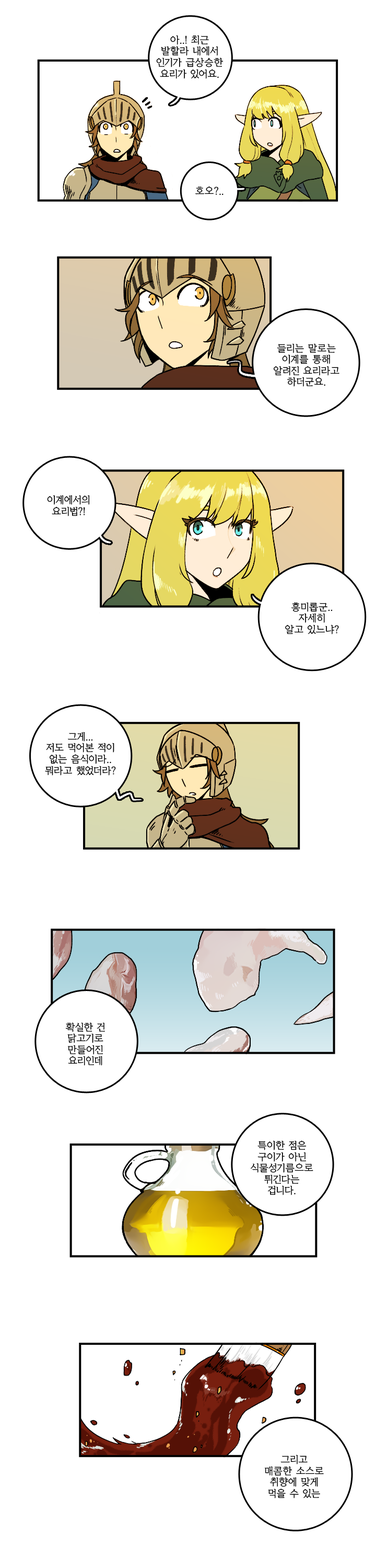
<style>
.page{position:relative;width:376px;height:1568px;background:#ffffff}
.page>*{position:absolute;margin:0}
.t1{font:9.4px "KoreanYMJ-B";color:#000000}
</style>
<div class="page">
<p class="t1" style="left:156px;top:35px;width:67px;height:44px;text-align:center">아..! 최근<br>발할라 내에서<br>인기가 급상승한<br>요리가 있어요.</p>
<p class="t1" style="left:195px;top:186px;width:29px;height:9px">호오?..</p>
<p class="t1" style="left:274px;top:343px;width:66px;height:44px;text-align:center">들리는 말로는<br>이계를 통해<br>알려진 요리라고<br>하더군요.</p>
<p class="t1" style="left:47px;top:495px;width:43px;height:21px;text-align:center">이계에서의<br>요리법?!</p>
<p class="t1" style="left:285px;top:602px;width:54px;height:33px;text-align:center">흥미롭군..<br>자세히<br>알고 있느냐?</p>
<p class="t1" style="left:45px;top:732px;width:71px;height:44px;text-align:center">그게...<br>저도 먹어본 적이<br>없는 음식이라..<br>뭐라고 했었더라?</p>
<p class="t1" style="left:65px;top:1022px;width:40px;height:44px;text-align:center">확실한 건<br>닭고기로<br>만들어진<br>요리인데</p>
<p class="t1" style="left:251px;top:1140px;width:63px;height:55px;text-align:center">특이한 점은<br>구이가 아닌<br>식물성기름으로<br>튀긴다는<br>겁니다.</p>
<p class="t1" style="left:264px;top:1455px;width:60px;height:43px;text-align:center">그리고<br>매콤한 소스로<br>취향에 맞게<br>먹을 수 있는</p>
</div>
